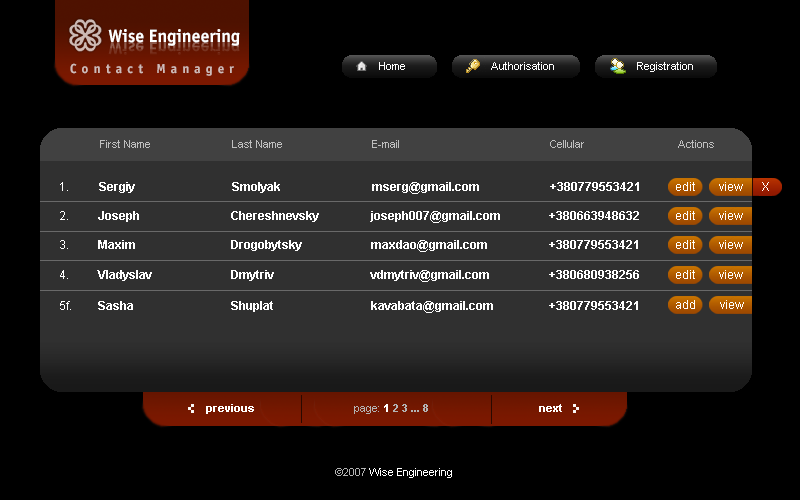
<style>
.page{position:relative;width:800px;height:500px;background:#000000}
.page>*{position:absolute;margin:0}
.t1{font:18px "OfficinaSansBold";color:#ffffff}
.t2{font:13px "OfficinaSansBold";letter-spacing:0.4em;color:#cfbbb8}
.t3{font:11px "ArialMT";color:#ffffff}
.t4{font:11px "ArialMT";color:#bfbfbf}
.t5{font:12px "ArialMT";color:#ffffff}
.t6{font:12px "Arial-BoldMT";color:#ffffff}
.t7{font:11px "Arial-BoldMT";color:#ffffff}
.t8{font:11px "Arial-BoldMT";color:#b3b3b3}
.t9{font:11px "ArialMT";color:#b3b3b3}
</style>
<div class="page">
<p class="t1" style="left:108px;top:29px;width:132px;height:17px">Wise Engineering</p>
<p class="t2" style="left:70px;top:63px;width:164px;height:13px">Contact Manager</p>
<p class="t3" style="left:379px;top:62px;width:26px;height:8px">Home</p>
<p class="t3" style="left:491px;top:62px;width:63px;height:8px">Authorisation</p>
<p class="t3" style="left:637px;top:62px;width:56px;height:10px">Registration</p>
<p class="t4" style="left:100px;top:140px;width:50px;height:8px">First Name</p>
<p class="t4" style="left:232px;top:140px;width:50px;height:8px">Last Name</p>
<p class="t4" style="left:372px;top:140px;width:27px;height:8px">E-mail</p>
<p class="t4" style="left:550px;top:140px;width:34px;height:8px">Cellular</p>
<p class="t4" style="left:678px;top:140px;width:36px;height:8px">Actions</p>
<p class="t5" style="left:60px;top:182px;width:8px;height:9px">1.</p>
<p class="t6" style="left:99px;top:182px;width:36px;height:11px">Sergiy</p>
<p class="t6" style="left:232px;top:182px;width:48px;height:11px">Smolyak</p>
<p class="t6" style="left:372px;top:182px;width:107px;height:12px">mserg@gmail.com</p>
<p class="t6" style="left:550px;top:182px;width:89px;height:9px">+380779553421</p>
<p class="t5" style="left:676px;top:182px;width:67px;height:9px">edit        view</p>
<p class="t5" style="left:762px;top:182px;width:7px;height:9px">X</p>
<p class="t5" style="left:60px;top:211px;width:8px;height:9px">2.</p>
<p class="t6" style="left:98px;top:211px;width:41px;height:11px">Joseph</p>
<p class="t6" style="left:231px;top:211px;width:88px;height:11px">Chereshnevsky</p>
<p class="t6" style="left:370px;top:211px;width:130px;height:12px">joseph007@gmail.com</p>
<p class="t6" style="left:549px;top:211px;width:90px;height:9px">+380663948632</p>
<p class="t5" style="left:676px;top:211px;width:67px;height:9px">edit        view</p>
<p class="t5" style="left:60px;top:240px;width:8px;height:9px">3.</p>
<p class="t6" style="left:98px;top:240px;width:37px;height:9px">Maxim</p>
<p class="t6" style="left:231px;top:240px;width:71px;height:11px">Drogobytsky</p>
<p class="t6" style="left:371px;top:240px;width:116px;height:12px">maxdao@gmail.com</p>
<p class="t6" style="left:549px;top:240px;width:89px;height:9px">+380779553421</p>
<p class="t5" style="left:676px;top:240px;width:67px;height:9px">edit        view</p>
<p class="t5" style="left:60px;top:270px;width:8px;height:9px">4.</p>
<p class="t6" style="left:97px;top:270px;width:55px;height:11px">Vladyslav</p>
<p class="t6" style="left:231px;top:270px;width:43px;height:11px">Dmytriv</p>
<p class="t6" style="left:370px;top:270px;width:119px;height:12px">vdmytriv@gmail.com</p>
<p class="t6" style="left:549px;top:270px;width:90px;height:9px">+380680938256</p>
<p class="t5" style="left:676px;top:270px;width:67px;height:9px">edit        view</p>
<p class="t5" style="left:60px;top:301px;width:11px;height:9px">5f.</p>
<p class="t6" style="left:98px;top:301px;width:35px;height:9px">Sasha</p>
<p class="t6" style="left:231px;top:301px;width:42px;height:11px">Shuplat</p>
<p class="t6" style="left:371px;top:301px;width:122px;height:12px">kavabata@gmail.com</p>
<p class="t6" style="left:549px;top:301px;width:89px;height:9px">+380779553421</p>
<p class="t5" style="left:676px;top:300px;width:68px;height:9px">add        view</p>
<p class="t7" style="left:206px;top:404px;width:48px;height:10px">previous</p>
<p class="t8" style="left:354px;top:404px;width:74px;height:10px"><span class="t9">page: </span><span class="t7">1 </span>2 3 ... 8</p>
<p class="t7" style="left:539px;top:404px;width:23px;height:8px">next</p>
<p class="t3" style="left:335px;top:468px;width:117px;height:10px"><span class="t9">©2007</span> Wise Engineering</p>
</div>
